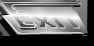
<style>
.page{position:relative;width:94px;height:46px;background:#000000}
.page>*{position:absolute;margin:0}
.t1{font:20px "Ethnocentric";letter-spacing:0.2em;scale:0.77 1}
</style>
<div class="page">
<p class="t1" style="left:32px;top:16px;width:46px;height:11px">XIT</p>
</div>
